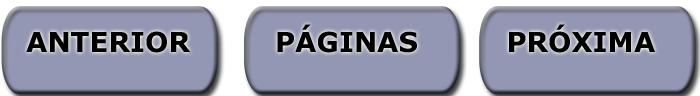
<style>
.page{position:relative;width:700px;height:96px;background:#9497b4}
.page>*{position:absolute;margin:0}
.t1{font:27.4px "Verdana-Bold";color:#010000}
</style>
<div class="page">
<p class="t1" style="left:277px;top:24px;width:140px;height:29px">PÁGINAS</p>
<p class="t1" style="left:509px;top:24px;width:146px;height:29px">PRÓXIMA</p>
<p class="t1" style="left:26px;top:31px;width:165px;height:22px">ANTERIOR</p>
</div>
